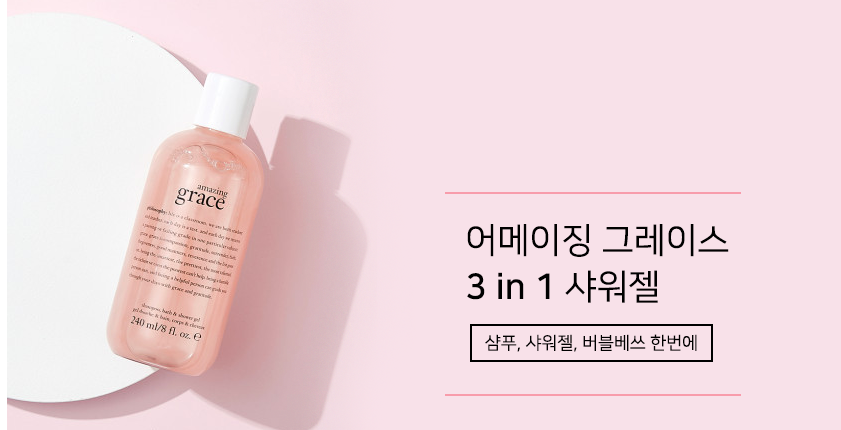
<style>
.page{position:relative;width:841px;height:430px;background:#f8e1e9}
.page>*{position:absolute;margin:0}
.t1{font:35px/46.6px "NanumSquareR";color:#000000}
.t2{font:35px/46.6px "NanumSquareB";color:#000000}
.t3{font:17.5px "NanumSquareR";color:#000000}
</style>
<div class="page">
<p class="t1" style="left:467px;top:224px;width:262px;height:79px;text-align:justify">어메이징 그레이스<br><span class="t2">3 in 1</span> 샤워젤</p>
<p class="t3" style="left:485px;top:334px;width:212px;height:18px">샴푸, 샤워젤, 버블베쓰 한번에</p>
</div>
